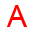
<style>
.page{position:relative;width:32px;height:32px;background:#ffffff}
.page>*{position:absolute;margin:0}
.t1{font:30px "ArialMT";color:#ff0000}
</style>
<div class="page">
<p class="t1" style="left:6px;top:5px;width:22px;height:22px">A</p>
</div>
